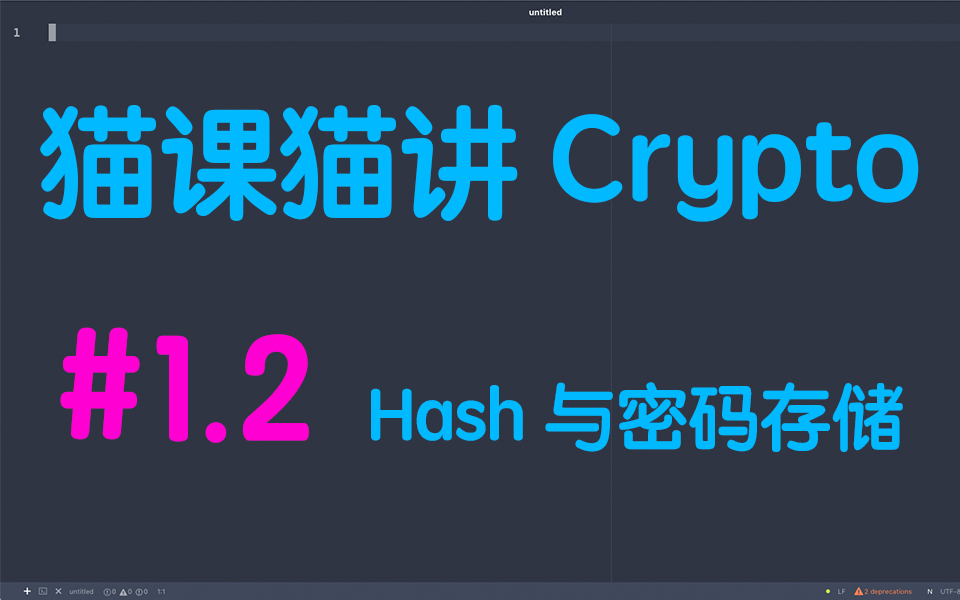
<style>
.page{position:relative;width:960px;height:600px;background:#2f3543}
.page>*{position:absolute;margin:0}
.t1{font:120px "STYuanti-SC-Bold";color:#00b9fe}
.t2{font:72px "STYuanti-SC-Bold";color:#00b9fe}
.t3{font:150px "STYuanti-SC-Bold";color:#fe00d1}
</style>
<div class="page">
<p class="t1" style="left:40px;top:104px;width:879px;height:118px">猫课猫讲 Crypto</p>
<p class="t2" style="left:60px;top:327px;width:843px;height:125px"><span class="t3">#1.2  </span>Hash 与密码存储</p>
</div>
